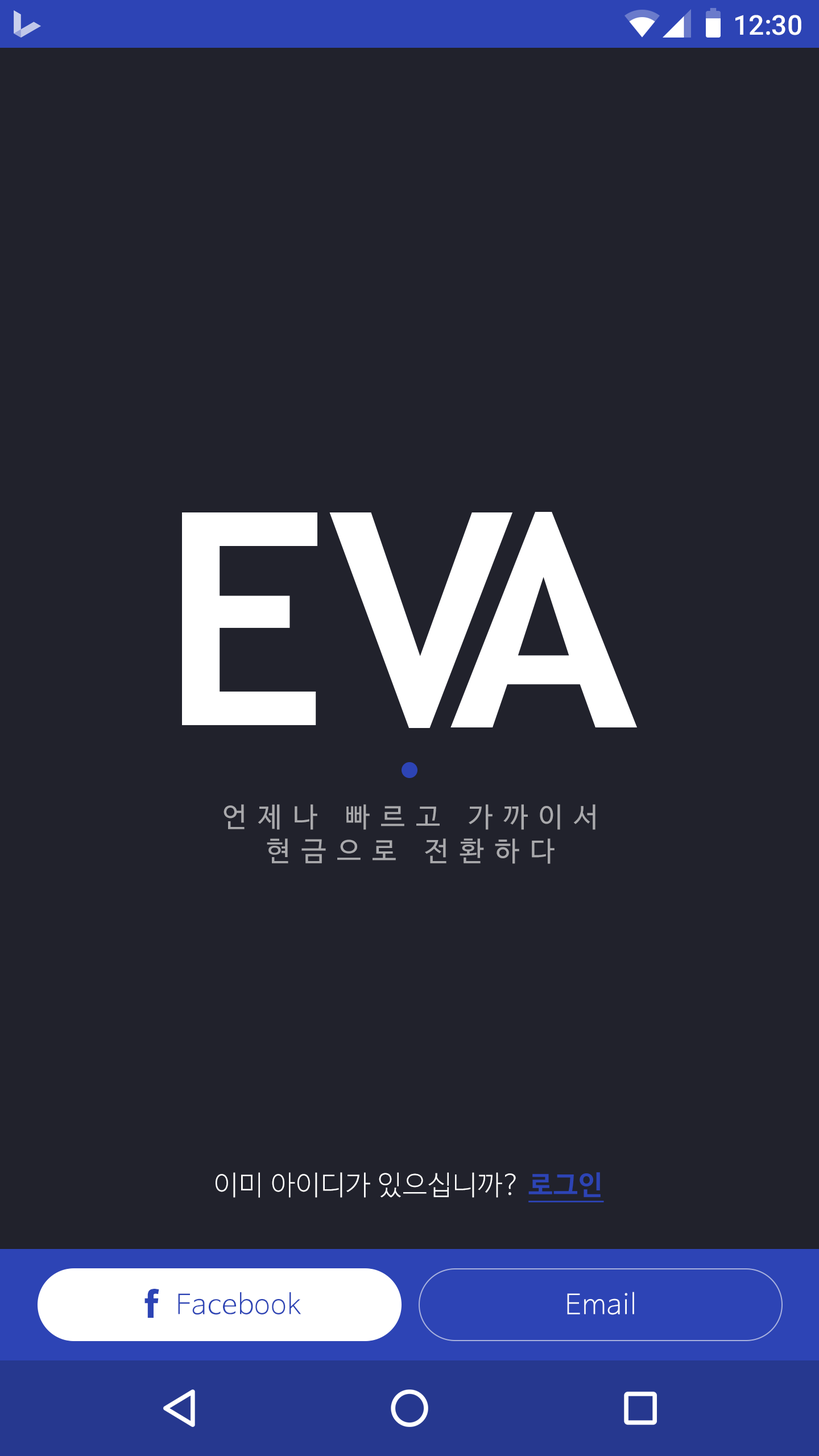
<style>
.page{position:relative;width:819px;height:1456px;background:#21222c}
.page>*{position:absolute;margin:0}
.t1{font:27.3px "Roboto-Medium";color:#ffffff}
.t2{font:27.3px/34.1px "NanumBarunGothic";letter-spacing:0.4em;color:#a9a9ac}
.t3{font:27.3px "NanumBarunGothicLight";letter-spacing:0.025em;color:#ffffff}
.t4{font:27.3px "NanumBarunGothicBold";letter-spacing:0.025em;color:#2d44b5;text-decoration:underline}
.t5{font:40.9px "Klavika-Bold";letter-spacing:0.025em;color:#2d44b5}
.t6{font:27.3px "NanumBarunGothicLight";letter-spacing:0.025em;color:#2d44b5}
</style>
<div class="page">
<p class="t1" style="left:735px;top:15px;width:66px;height:20px">12:30</p>
<p class="t2" style="left:224px;top:804px;width:371px;height:60px;text-align:center">언제나 빠르고 가까이서<br>현금으로 전환하다</p>
<p class="t3" style="left:216px;top:1172px;width:388px;height:30px">이미 아이디가 있으십니까? <span class="t4">로그인</span></p>
<p class="t5" style="left:144px;top:1289px;width:15px;height:29px">f</p>
<p class="t6" style="left:178px;top:1292px;width:123px;height:23px">Facebook</p>
<p class="t3" style="left:567px;top:1292px;width:67px;height:23px">Email</p>
</div>
